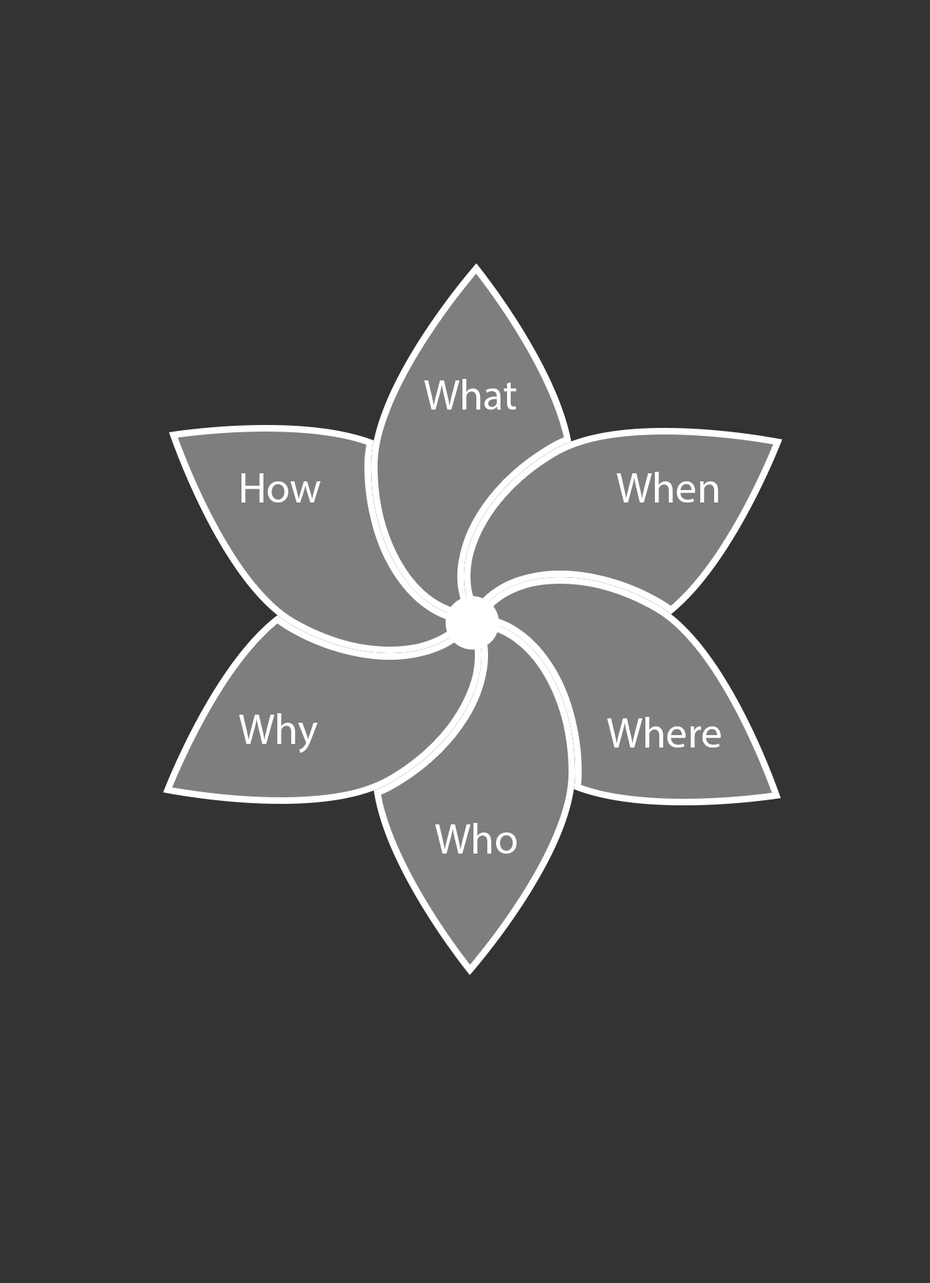
<style>
.page{position:relative;width:930px;height:1283px;background:#333333}
.page>*{position:absolute;margin:0}
.t1{font:42.7px "MyriadPro-Regular";color:#ffffff}
</style>
<div class="page">
<p class="t1" style="left:423px;top:379px;width:93px;height:31px">What</p>
<p class="t1" style="left:241px;top:473px;width:79px;height:29px">How</p>
<p class="t1" style="left:616px;top:472px;width:102px;height:30px">When</p>
<p class="t1" style="left:238px;top:713px;width:79px;height:40px">Why</p>
<p class="t1" style="left:606px;top:717px;width:114px;height:30px">Where</p>
<p class="t1" style="left:434px;top:823px;width:82px;height:30px">Who</p>
</div>
